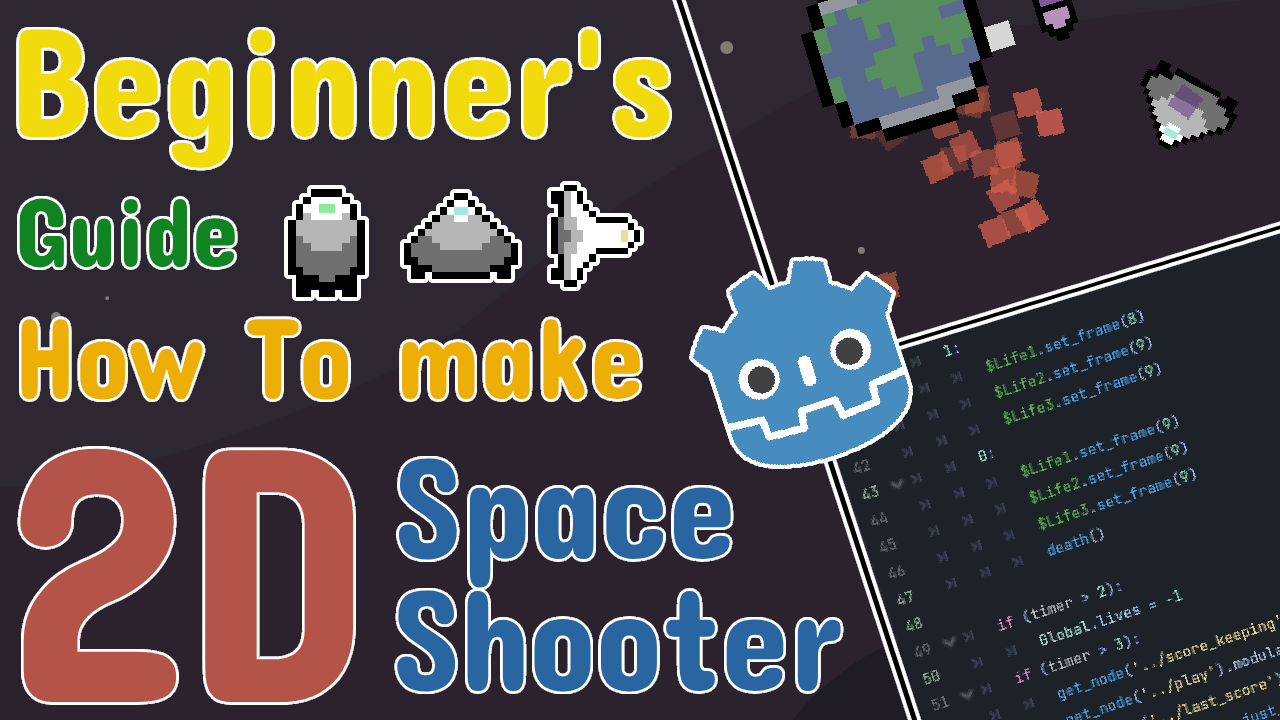
<style>
.page{position:relative;width:1280px;height:720px;background:#2b222e}
.page>*{position:absolute;margin:0}
.t1{font:157.2px "ConcertOne-Regular";color:#f1db0c;scale:0.94 1}
.t2{font:99.5px "ConcertOne-Regular";color:#118422;scale:0.94 1}
.t3{font:116.6px "ConcertOne-Regular";color:#edae05;scale:0.94 1}
.t4{font:368.2px "ConcertOne-Regular";color:#b45348;scale:0.94 1}
.t5{font:146.1px "ConcertOne-Regular";color:#2965a1;scale:0.94 1}
</style>
<div class="page">
<p class="t1" style="left:19px;top:29px;width:651px;height:139px">Beginner's</p>
<p class="t2" style="left:19px;top:198px;width:216px;height:70px">Guide</p>
<p class="t3" style="left:21px;top:319px;width:619px;height:81px">How To make</p>
<p class="t4" style="left:20px;top:448px;width:333px;height:254px">2D</p>
<p class="t5" style="left:398px;top:458px;width:333px;height:130px">Space</p>
<p class="t5" style="left:397px;top:590px;width:444px;height:102px">Shooter</p>
</div>
